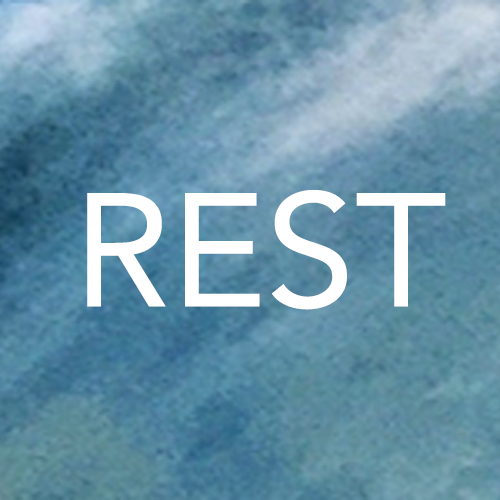
<style>
.page{position:relative;width:500px;height:500px}
.page>*{position:absolute;margin:0}
.t1{font:160px "Avenir-Roman";color:#ffffff}
</style>
<div class="page">
<p class="t1" style="left:87px;top:190px;width:359px;height:120px">REST</p>
</div>
